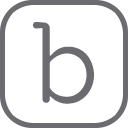
<style>
.page{position:relative;width:128px;height:128px;background:#ffffff}
.page>*{position:absolute;margin:0}
.t1{font:110px "KiwiMaru-Light";color:#6c6c70}
</style>
<div class="page">
<p class="t1" style="left:33px;top:22px;width:61px;height:82px">b</p>
</div>
